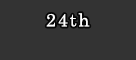
<style>
.page{position:relative;width:136px;height:60px;background:#333333}
.page>*{position:absolute;margin:0}
.t1{font:18px "Century";letter-spacing:0.1em;color:#ffffff}
</style>
<div class="page">
<p class="t1" style="left:46px;top:13px;width:44px;height:14px">24th</p>
</div>
